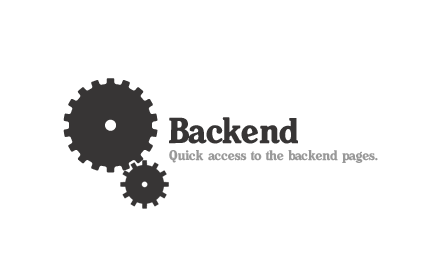
<style>
.page{position:relative;width:440px;height:280px;background:#ffffff}
.page>*{position:absolute;margin:0}
.t1{font:36px "Heineken";letter-spacing:-0.025em;color:#373535}
.t2{font:14px "Heineken";letter-spacing:-0.025em;color:#999999}
</style>
<div class="page">
<p class="t1" style="left:169px;top:117px;width:129px;height:27px">Backend</p>
<p class="t2" style="left:169px;top:150px;width:209px;height:13px">Quick access to the backend pages.</p>
</div>
